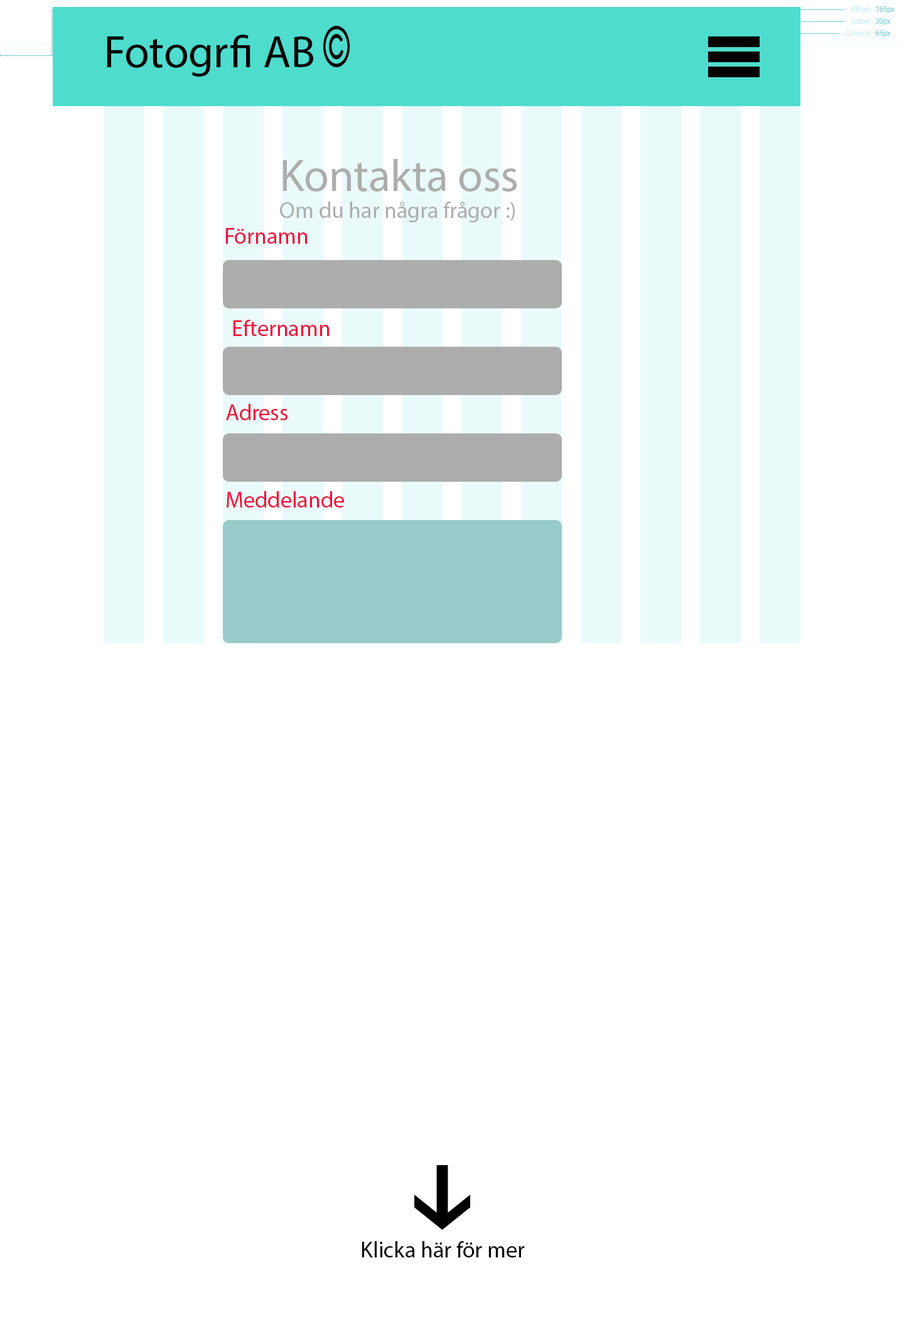
<style>
.page{position:relative;width:904px;height:1319px;background:#ffffff}
.page>*{position:absolute;margin:0}
.t1{font:45.2px "MyriadPro-Regular";color:#000000}
.t2{font:22.6px "MyriadPro-Regular";color:#adadad}
.t3{font:45.2px "MyriadPro-Regular";color:#adadad}
.t4{font:22.6px "MyriadPro-Regular";color:#ef0d38}
.t5{font:22.6px "MyriadPro-Regular";color:#000000}
</style>
<div class="page">
<p class="t1" style="left:107px;top:35px;width:206px;height:42px">Fotogrfi AB</p>
<p class="t2" style="left:280px;top:159px;width:237px;height:63px"><span class="t3">Kontakta oss<br></span>Om du har några frågor :)</p>
<p class="t4" style="left:225px;top:228px;width:83px;height:16px">Förnamn</p>
<p class="t4" style="left:233px;top:320px;width:97px;height:16px">Efternamn</p>
<p class="t4" style="left:226px;top:404px;width:62px;height:16px">Adress</p>
<p class="t4" style="left:227px;top:491px;width:117px;height:16px">Meddelande</p>
<p class="t5" style="left:362px;top:1241px;width:163px;height:16px">Klicka här för mer</p>
</div>
